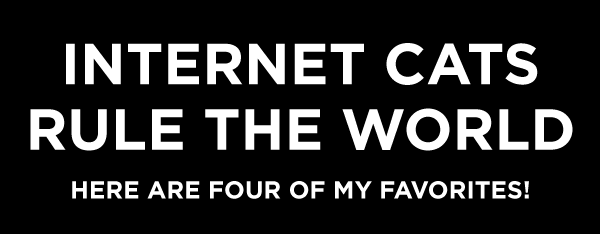
<style>
.page{position:relative;width:600px;height:234px;background:#000000}
.page>*{position:absolute;margin:0}
.t1{font:24.6px/48.8px "GothamHTF-Bold";color:#ffffff;text-transform:uppercase}
.t2{font:57.9px/90.5px "GothamHTF-Bold";color:#ffffff;text-transform:uppercase}
.t3{font:57.9px/65.5px "GothamHTF-Bold";color:#ffffff;text-transform:uppercase}
</style>
<div class="page">
<p class="t1" style="left:30px;top:43px;width:543px;height:156px;text-align:center"><span class="t2">Internet cats<br></span><span class="t3">Rule the world<br></span>Here are four of my favorites!</p>
</div>
